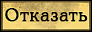
<style>
.page{position:relative;width:92px;height:32px}
.page>*{position:absolute;margin:0}
.t1{font:18px "CooperLightCBT";letter-spacing:0.03em;color:#000000;font-weight:bold}
</style>
<div class="page">
<p class="t1" style="left:5px;top:8px;width:83px;height:14px">Отказать</p>
</div>
